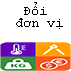
<style>
.page{position:relative;width:71px;height:71px;background:#ffffff}
.page>*{position:absolute;margin:0}
.t1{font:14px/12px "CourierNewPSMT";color:#000000}
</style>
<div class="page">
<p class="t1" style="left:16px;top:2px;width:47px;height:27px;text-align:center">Đổi <br>đơn vị</p>
</div>
